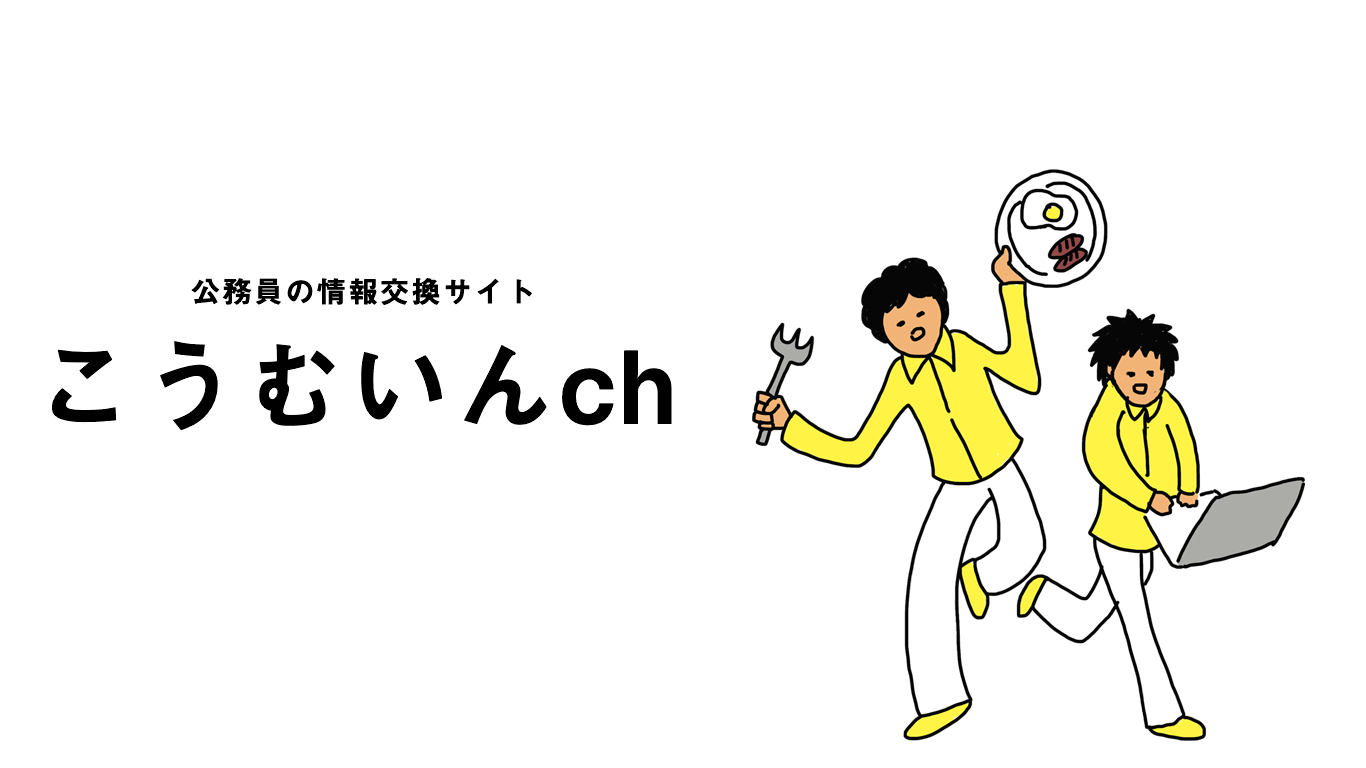
<style>
.page{position:relative;width:1366px;height:768px;background:#ffffff}
.page>*{position:absolute;margin:0}
.t1{font:30px "MidashiGoPr6N-MB31";letter-spacing:0.05em;color:#000000}
.t2{font:100px "MidashiGoPr6N-MB31";letter-spacing:0.05em;color:#000000}
</style>
<div class="page">
<p class="t1" style="left:191px;top:278px;width:341px;height:28px">公務員の情報交換サイト</p>
<p class="t2" style="left:52px;top:341px;width:620px;height:90px">こうむいんch</p>
</div>
